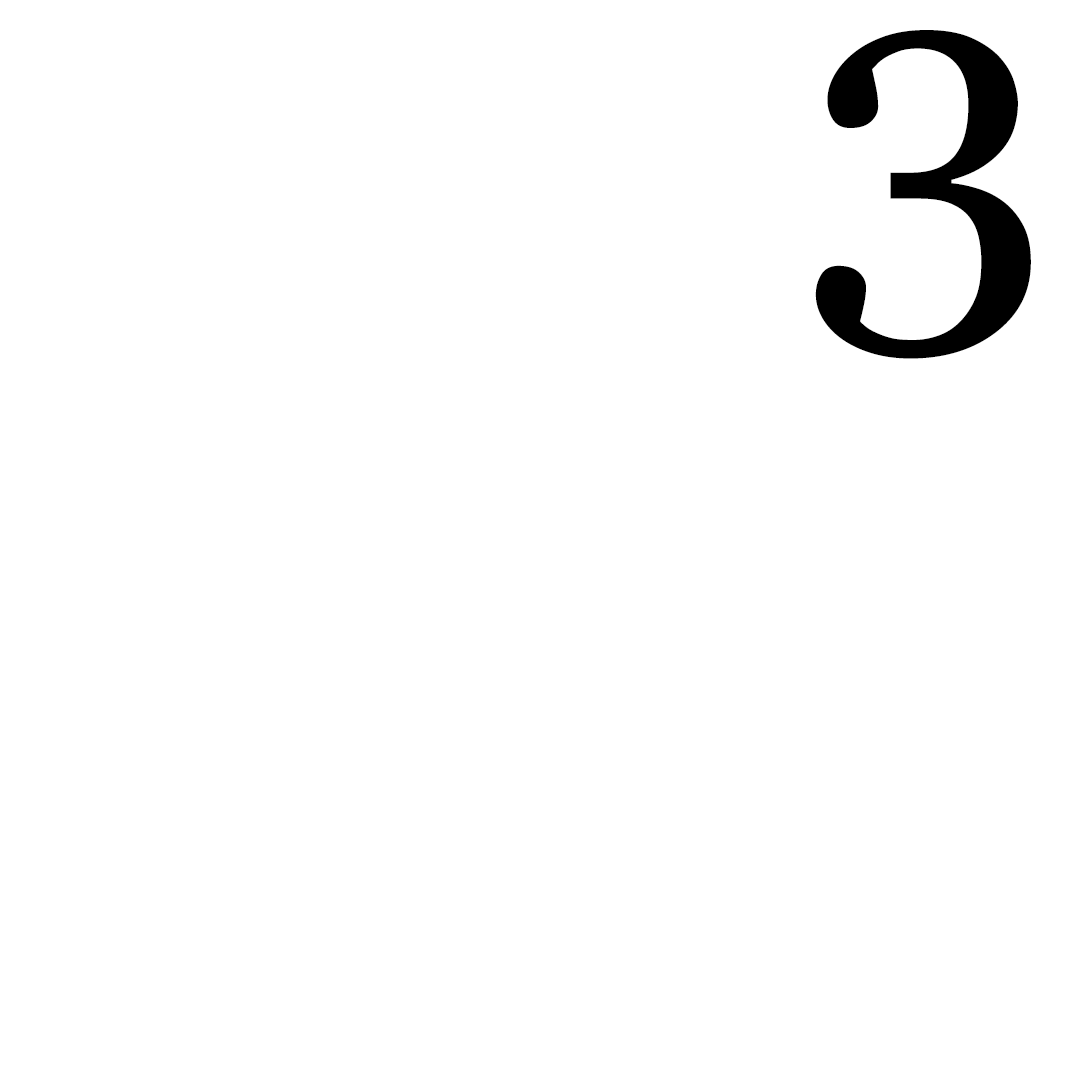
<style>
.page{position:relative;width:1080px;height:1080px;background:#ffffff}
.page>*{position:absolute;margin:0}
.t1{font:457.4px "Georgia";color:#000000}
</style>
<div class="page">
<p class="t1" style="left:815px;top:30px;width:216px;height:329px">3</p>
</div>
